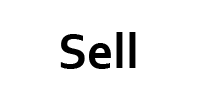
<style>
.page{position:relative;width:197px;height:100px;background:#ffffff}
.page>*{position:absolute;margin:0}
.t1{font:50.8px "Corbel-Bold";color:#000000}
</style>
<div class="page">
<p class="t1" style="left:60px;top:32px;width:76px;height:37px">Sell</p>
</div>
